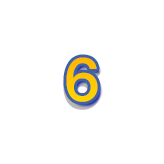
<style>
.page{position:relative;width:164px;height:164px;background:#ffffff}
.page>*{position:absolute;margin:0}
.t1{font:59.8px "PingFangHK-Semibold";color:#ffc500;text-transform:uppercase}
</style>
<div class="page">
<p class="t1" style="left:66px;top:57px;width:32px;height:45px">6</p>
</div>
